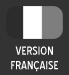
<style>
.page{position:relative;width:69px;height:75px;background:#333333}
.page>*{position:absolute;margin:0}
.t1{font:11.2px "BlueHighwayD-Regular";color:#ffffff;text-transform:uppercase}
</style>
<div class="page">
<p class="t1" style="left:11px;top:46px;width:47px;height:26px;text-align:center">version<br>française</p>
</div>
